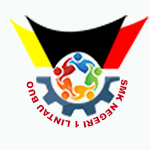
<style>
.page{position:relative;width:150px;height:150px;background:#f7fcfb}
.page>*{position:absolute;margin:0}
.t1{font:8.7px "Arial-Black";color:#c7011d}
</style>
<div class="page">
<p class="t1" style="left:26px;top:79px;width:102px;height:49px;rotate:1deg">SMK NEGERI 1 LINTAU BUO</p>
</div>
